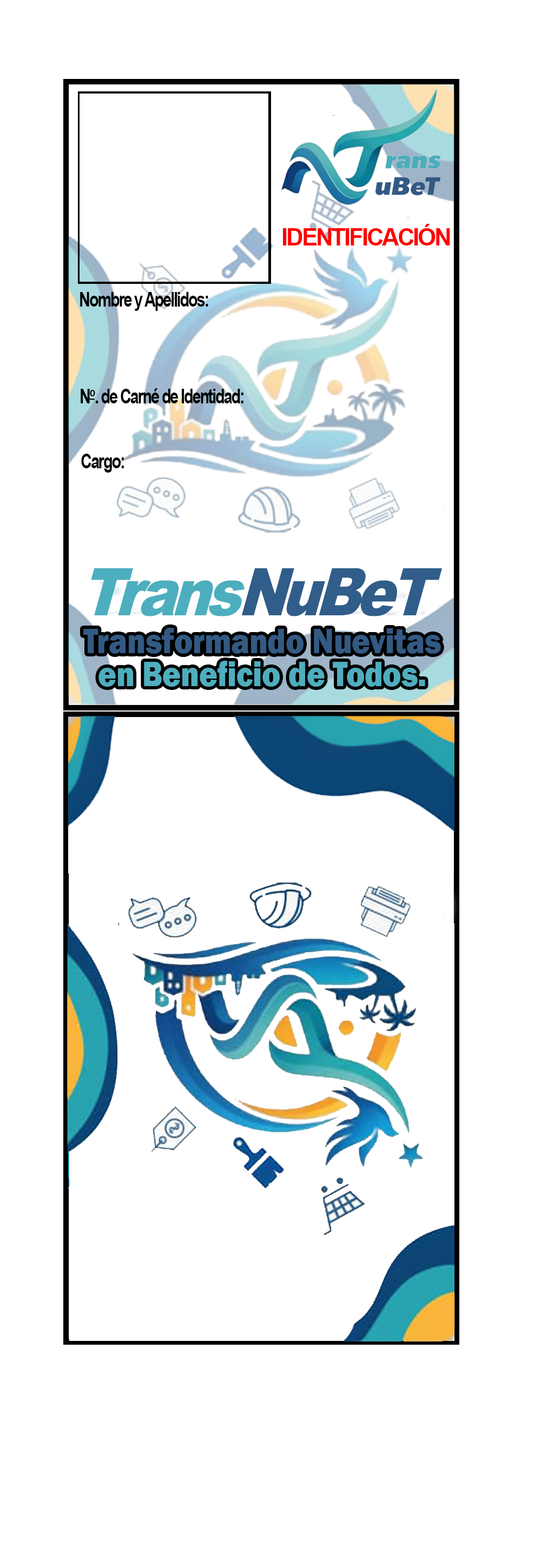
<style>
.page{position:relative;width:541px;height:1568px;background:#ffffff}
.page>*{position:absolute;margin:0}
.t1{font:23.6px "Arial-BoldMT";letter-spacing:-0.075em;color:#ff0000}
.t2{font:20.6px "Arial-BoldMT";letter-spacing:-0.075em;color:#000000;scale:0.76 1}
.t3{font:20.6px "Arial-BoldMT";letter-spacing:-0.075em;color:#000000;text-decoration:underline;scale:0.76 1}
.t4{font:68.2px "Arial-Black";letter-spacing:-0.075em;color:#4caebe;scale:0.84 1}
.t5{font:68.2px "Arial-Black";letter-spacing:-0.075em;color:#305d89;scale:0.84 1}
</style>
<div class="page">
<p class="t1" style="left:283px;top:224px;width:167px;height:21px">IDENTIFICACIÓN</p>
<p class="t2" style="left:80px;top:292px;width:128px;height:19px">Nombre y Apellidos:</p>
<p class="t2" style="left:81px;top:388px;width:162px;height:15px">N<span class="t3">o</span>. de Carné de Identidad:</p>
<p class="t2" style="left:81px;top:454px;width:43px;height:19px">Cargo:</p>
<p class="t4" style="left:91px;top:568px;width:153px;height:48px">Trans</p>
<p class="t5" style="left:242px;top:568px;width:200px;height:48px">NuBeT</p>
</div>
